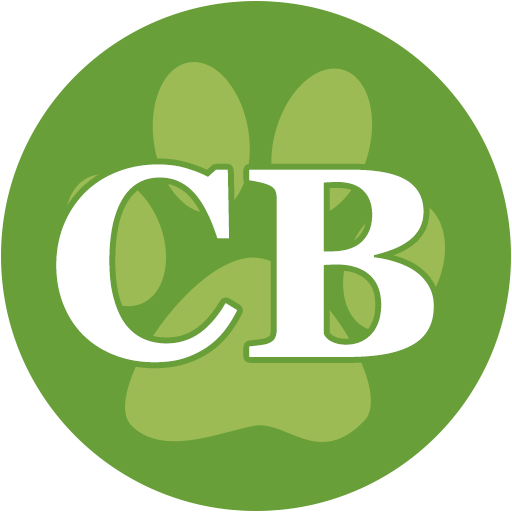
<style>
.page{position:relative;width:512px;height:512px;background:#689f38}
.page>*{position:absolute;margin:0}
.t1{font:270px "Georgia-Bold";color:#ffffff}
.t2{font:220px "TrajanPro-Regular";color:#ffffff}
.t3{font:270px "TrajanPro-Regular";color:#ffffff}
</style>
<div class="page">
<p class="t1" style="left:56px;top:164px;width:378px;height:199px"><span class="t2"><br><br></span><span class="t3"><br></span>CB</p>
</div>
